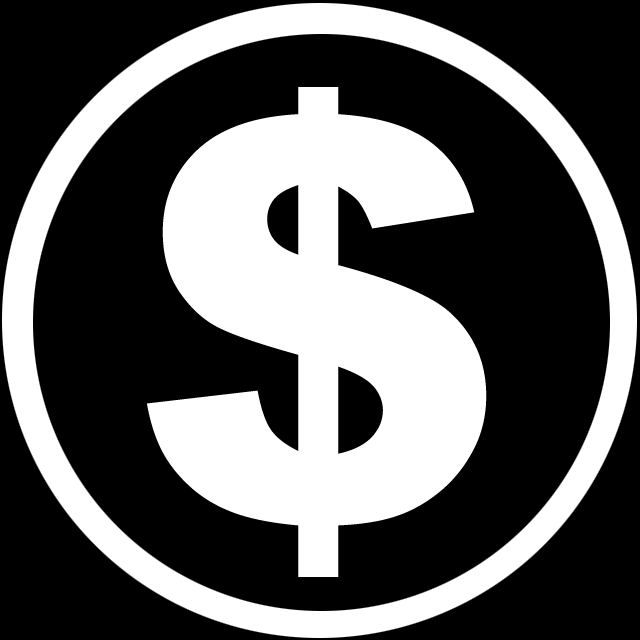
<style>
.page{position:relative;width:640px;height:640px;background:#000000}
.page>*{position:absolute;margin:0}
.t1{font:560px "Arial-Black";color:#ffffff}
</style>
<div class="page">
<p class="t1" style="left:147px;top:87px;width:340px;height:490px">$</p>
</div>
